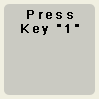
<style>
.page{position:relative;width:99px;height:99px;background:#cacac2}
.page>*{position:absolute;margin:0}
.t1{font:12px "ArialMT";letter-spacing:0.2em;color:#010100;font-weight:bold}
</style>
<div class="page">
<p class="t1" style="left:21px;top:10px;width:58px;height:25px;text-align:center">Press<br>Key "1"</p>
</div>
